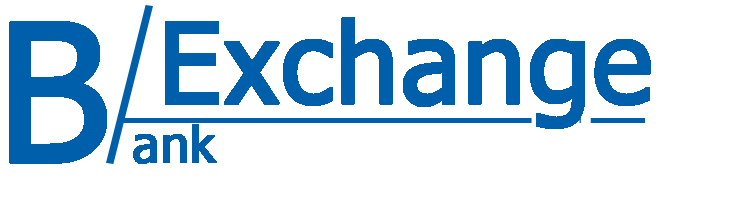
<style>
.page{position:relative;width:750px;height:200px;background:#ffffff}
.page>*{position:absolute;margin:0}
.t1{font:112.1px "Tahoma";color:#005fab;font-weight:bold}
.t2{font:190.6px "Tahoma";color:#005fab;font-weight:bold}
.t3{font:50px "Tahoma";color:#005fab;font-weight:bold}
</style>
<div class="page">
<p class="t1" style="left:165px;top:17px;width:486px;height:112px">Exchange</p>
<p class="t2" style="left:9px;top:21px;width:98px;height:143px">B</p>
<p class="t3" style="left:133px;top:124px;width:84px;height:40px">ank</p>
</div>
